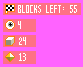
<style>
.page{position:relative;width:83px;height:67px;background:#ff63ff}
.page>*{position:absolute;margin:0}
.t1{font:14px "Pixel-Rift";color:#ffffff}
</style>
<div class="page">
<p class="t1" style="left:18px;top:5px;width:59px;height:8px">BLOCKS left: 55</p>
<p class="t1" style="left:18px;top:21px;width:3px;height:8px">4</p>
<p class="t1" style="left:19px;top:37px;width:7px;height:8px">24</p>
<p class="t1" style="left:19px;top:53px;width:7px;height:8px">13</p>
</div>
